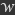
<style>
.page{position:relative;width:15px;height:15px;background:#333333}
.page>*{position:absolute;margin:0}
.t1{font:10.8px "LucidaCalligraphy-Italic";color:#dddddd}
</style>
<div class="page">
<p class="t1" style="left:0px;top:3px;width:15px;height:9px">W</p>
</div>
